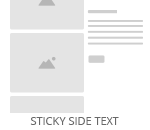
<style>
.page{position:relative;width:150px;height:130px;background:#ffffff}
.page>*{position:absolute;margin:0}
.t1{font:11px "OpenSans";color:#686868;text-transform:uppercase}
</style>
<div class="page">
<p class="t1" style="left:30px;top:117px;width:89px;height:8px">Sticky Side Text</p>
</div>
